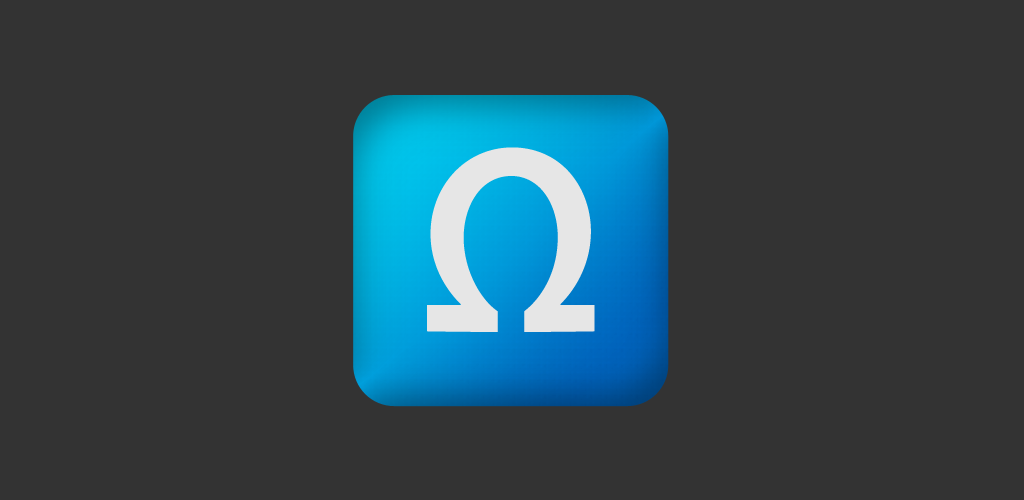
<style>
.page{position:relative;width:1024px;height:500px;background:#333333}
.page>*{position:absolute;margin:0}
.t1{font:216px "AdobeGothicStd-Bold";color:#e6e6e6}
</style>
<div class="page">
<p class="t1" style="left:427px;top:147px;width:168px;height:185px">Ω</p>
</div>
